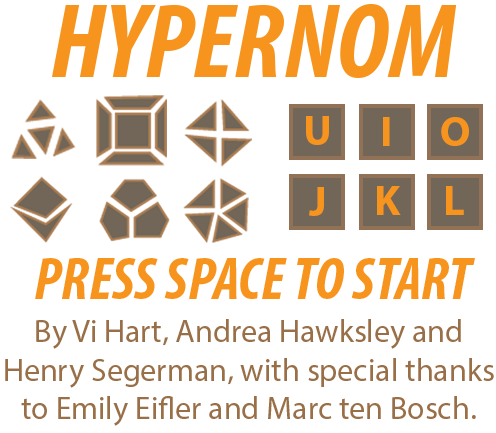
<style>
.page{position:relative;width:496px;height:433px;background:#ffffff}
.page>*{position:absolute;margin:0}
.t1{font:106.9px "MyriadPro-BoldCondIt";color:#f7941e}
.t2{font:42.5px "MyriadPro-Bold";color:#f7941e}
.t3{font:60px "MyriadPro-BoldCondIt";color:#f7941e}
.t4{font:32px "MyriadPro-Regular";color:#996f48}
</style>
<div class="page">
<p class="t1" style="left:52px;top:4px;width:405px;height:74px">HYPERNOM</p>
<p class="t2" style="left:306px;top:116px;width:23px;height:29px">U</p>
<p class="t2" style="left:383px;top:117px;width:7px;height:29px">I</p>
<p class="t2" style="left:441px;top:117px;width:28px;height:29px">O</p>
<p class="t2" style="left:309px;top:187px;width:15px;height:29px">J</p>
<p class="t2" style="left:377px;top:186px;width:24px;height:29px">K</p>
<p class="t2" style="left:446px;top:186px;width:18px;height:29px">L</p>
<p class="t3" style="left:35px;top:258px;width:440px;height:41px">PRESS SPACE TO START</p>
<p class="t4" style="left:5px;top:319px;width:489px;height:107px;text-align:center">By Vi Hart, Andrea Hawksley and Henry Segerman, with special thanks to Emily Eifler and Marc ten Bosch.</p>
</div>
